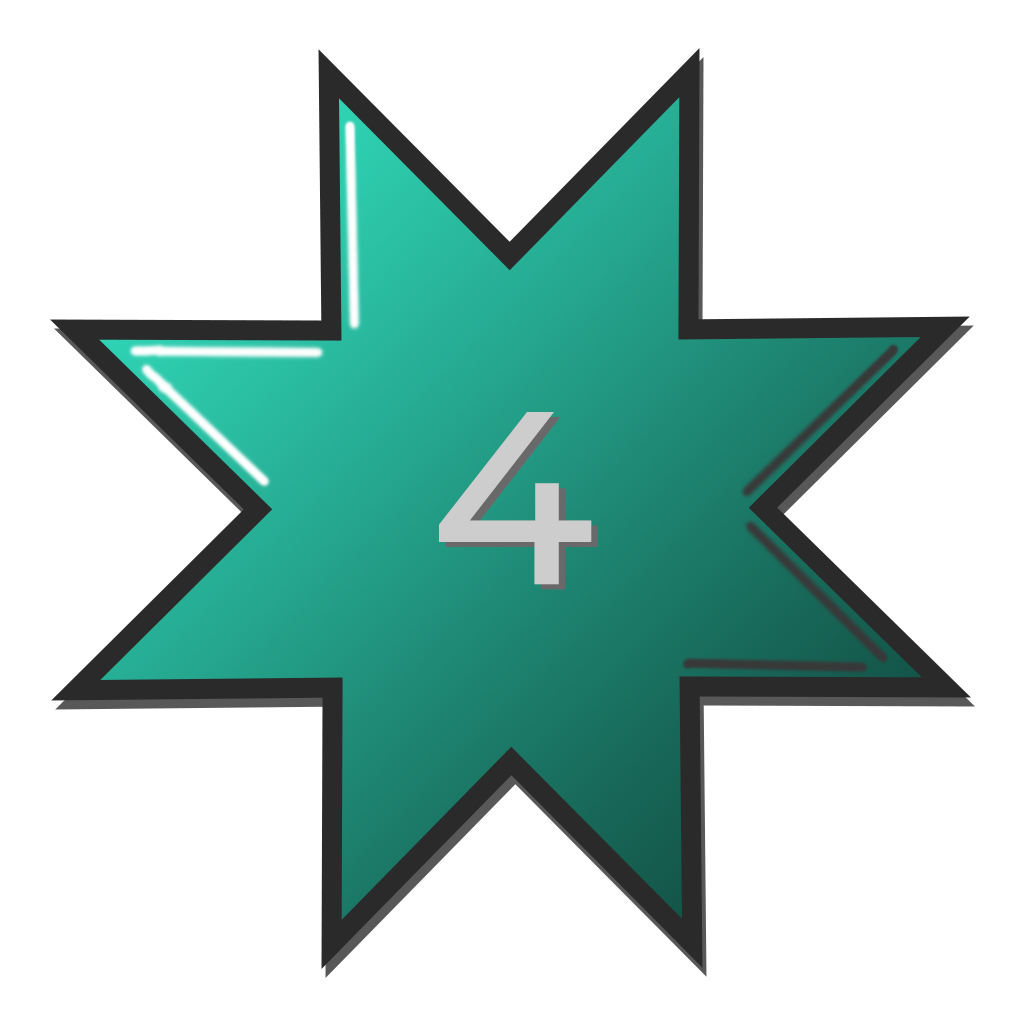
<style>
.page{position:relative;width:1024px;height:1024px;background:#ffffff}
.page>*{position:absolute;margin:0}
.t1{font:245.4px "Montserrat-Medium";color:#cdcdcd}
.t2{font:245.4px "Montserrat-Medium"}
</style>
<div class="page">
<p class="t1" style="left:439px;top:412px;width:153px;height:173px">4</p>
<p class="t2" style="left:445px;top:417px;width:153px;height:173px">4</p>
</div>
